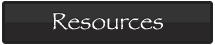
<style>
.page{position:relative;width:215px;height:45px;background:#292727}
.page>*{position:absolute;margin:0}
.t1{font:24px "Papyrus";color:#ffffff}
</style>
<div class="page">
<p class="t1" style="left:53px;top:13px;width:110px;height:17px">Resources</p>
</div>
